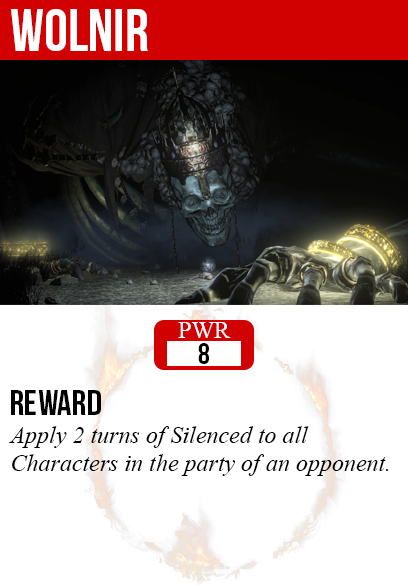
<style>
.page{position:relative;width:408px;height:585px;background:#ffffff}
.page>*{position:absolute;margin:0}
.t1{font:60px "BebasNeue";color:#ffffff}
.t2{font:24px "TimesNewRomanPSMT";color:#ffffff}
.t3{font:30px "BebasNeue";color:#000000}
.t4{font:36px "BebasNeue";color:#000000}
.t5{font:24px "TimesNewRomanPS-ItalicMT";color:#000000}
</style>
<div class="page">
<p class="t1" style="left:11px;top:9px;width:137px;height:42px">wolnir</p>
<p class="t2" style="left:178px;top:322px;width:53px;height:16px">PWR</p>
<p class="t3" style="left:198px;top:343px;width:11px;height:21px">8</p>
<p class="t4" style="left:11px;top:390px;width:90px;height:25px">reward</p>
<p class="t5" style="left:9px;top:426px;width:380px;height:50px">Apply 2 turns of Silenced to all<br>Characters in the party of an opponent.</p>
</div>
